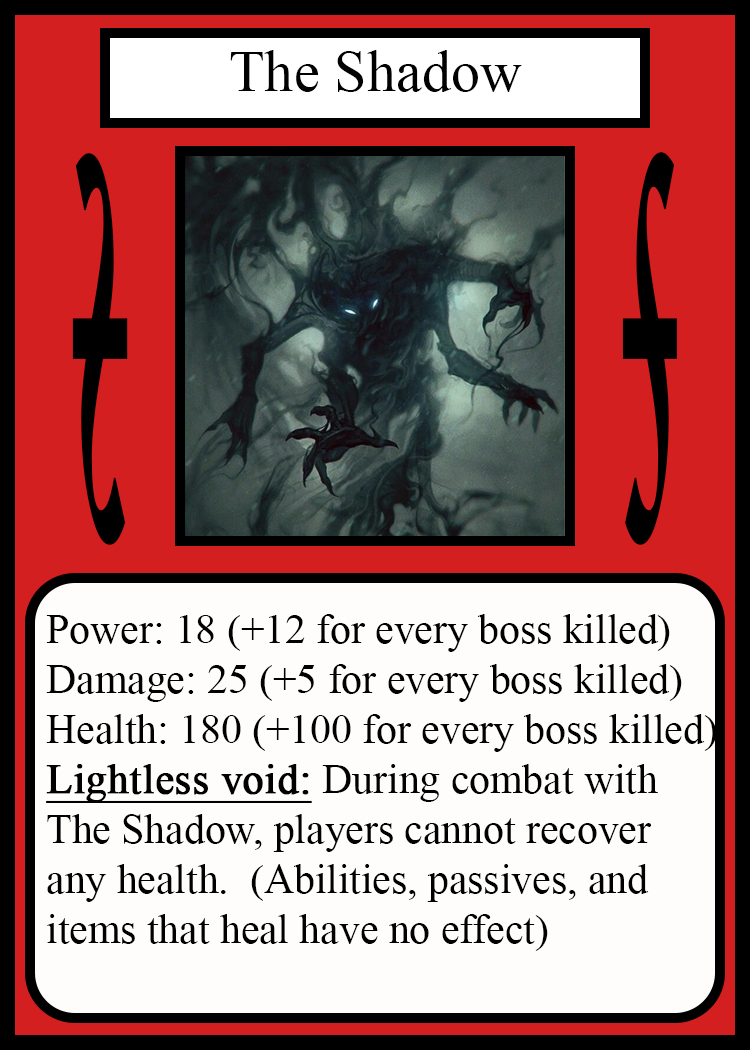
<style>
.page{position:relative;width:750px;height:1050px;background:#fffcfc}
.page>*{position:absolute;margin:0}
.t1{font:58.3px "TimesNewRomanPSMT";color:#010101}
.t2{font:814.3px "Apple-Chancery";color:#000000;font-weight:bold;scale:0.17 1}
.t3{font:814.6px "Apple-Chancery";color:#000000;font-weight:bold;scale:0.17 1}
.t4{font:41.7px "TimesNewRomanPSMT";color:#000000}
.t5{font:41.7px "TimesNewRomanPSMT";color:#000000;font-weight:bold;text-decoration:underline}
</style>
<div class="page">
<p class="t1" style="left:230px;top:50px;width:292px;height:42px">The Shadow</p>
<p class="t2" style="left:72px;top:153px;width:56px;height:392px;rotate:180deg">s</p>
<p class="t3" style="left:622px;top:152px;width:55px;height:393px">s</p>
<p class="t4" style="left:46px;top:614px;width:671px;height:337px">Power: 18 (+12 for every boss killed)<br>Damage: 25 (+5 for every boss killed)<br>Health: 180 (+100 for every boss killed)<br><span class="t5">Lightless void:</span> During combat with<br>The Shadow, players cannot recover<br>any health.  (Abilities, passives, and<br>items that heal have no effect)</p>
</div>
